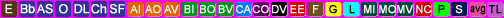
<style>
.page{position:relative;width:504px;height:18px;background:#ff00ff}
.page>*{position:absolute;margin:0}
.t1{font:12px "ArialMT";color:#ffffff;font-weight:bold}
.t2{font:11px "ArialMT";color:#ffffff;font-weight:bold}
.t3{font:11px "ArialMT";color:#000000;font-weight:bold}
.t4{font:11px "ArialMT";color:#010101;font-weight:bold}
.t5{font:11px "ArialMT";color:#010101;font-weight:bold;scale:0.86 1}
</style>
<div class="page">
<p class="t1" style="left:5px;top:4px;width:8px;height:10px">E</p>
<p class="t1" style="left:20px;top:4px;width:15px;height:10px">Bb</p>
<p class="t1" style="left:36px;top:4px;width:17px;height:10px">AS</p>
<p class="t1" style="left:59px;top:4px;width:9px;height:10px">O</p>
<p class="t1" style="left:74px;top:4px;width:16px;height:10px">DL</p>
<p class="t1" style="left:91px;top:4px;width:16px;height:10px">Ch</p>
<p class="t1" style="left:109px;top:4px;width:16px;height:10px">SF</p>
<p class="t2" style="left:130px;top:5px;width:10px;height:9px">AI</p>
<p class="t2" style="left:145px;top:5px;width:16px;height:9px">AO</p>
<p class="t2" style="left:164px;top:5px;width:15px;height:9px">AV</p>
<p class="t2" style="left:184px;top:5px;width:10px;height:9px">BI</p>
<p class="t2" style="left:200px;top:5px;width:15px;height:9px">BO</p>
<p class="t2" style="left:218px;top:5px;width:15px;height:9px">BV</p>
<p class="t2" style="left:236px;top:5px;width:15px;height:9px">CA</p>
<p class="t2" style="left:252px;top:5px;width:17px;height:9px">CO</p>
<p class="t2" style="left:272px;top:5px;width:15px;height:9px">DV</p>
<p class="t2" style="left:290px;top:5px;width:15px;height:9px">EE</p>
<p class="t2" style="left:313px;top:5px;width:6px;height:9px">F</p>
<p class="t3" style="left:329px;top:5px;width:8px;height:9px">G</p>
<p class="t3" style="left:349px;top:5px;width:6px;height:9px">L</p>
<p class="t2" style="left:364px;top:5px;width:11px;height:9px">MI</p>
<p class="t2" style="left:379px;top:5px;width:17px;height:9px">MO</p>
<p class="t2" style="left:397px;top:5px;width:16px;height:9px">MV</p>
<p class="t2" style="left:416px;top:5px;width:16px;height:9px">NC</p>
<p class="t4" style="left:438px;top:5px;width:7px;height:9px">P</p>
<p class="t2" style="left:455px;top:5px;width:8px;height:9px">S</p>
<p class="t5" style="left:470px;top:6px;width:16px;height:9px">avg</p>
<p class="t4" style="left:488px;top:5px;width:14px;height:9px">TL</p>
</div>
